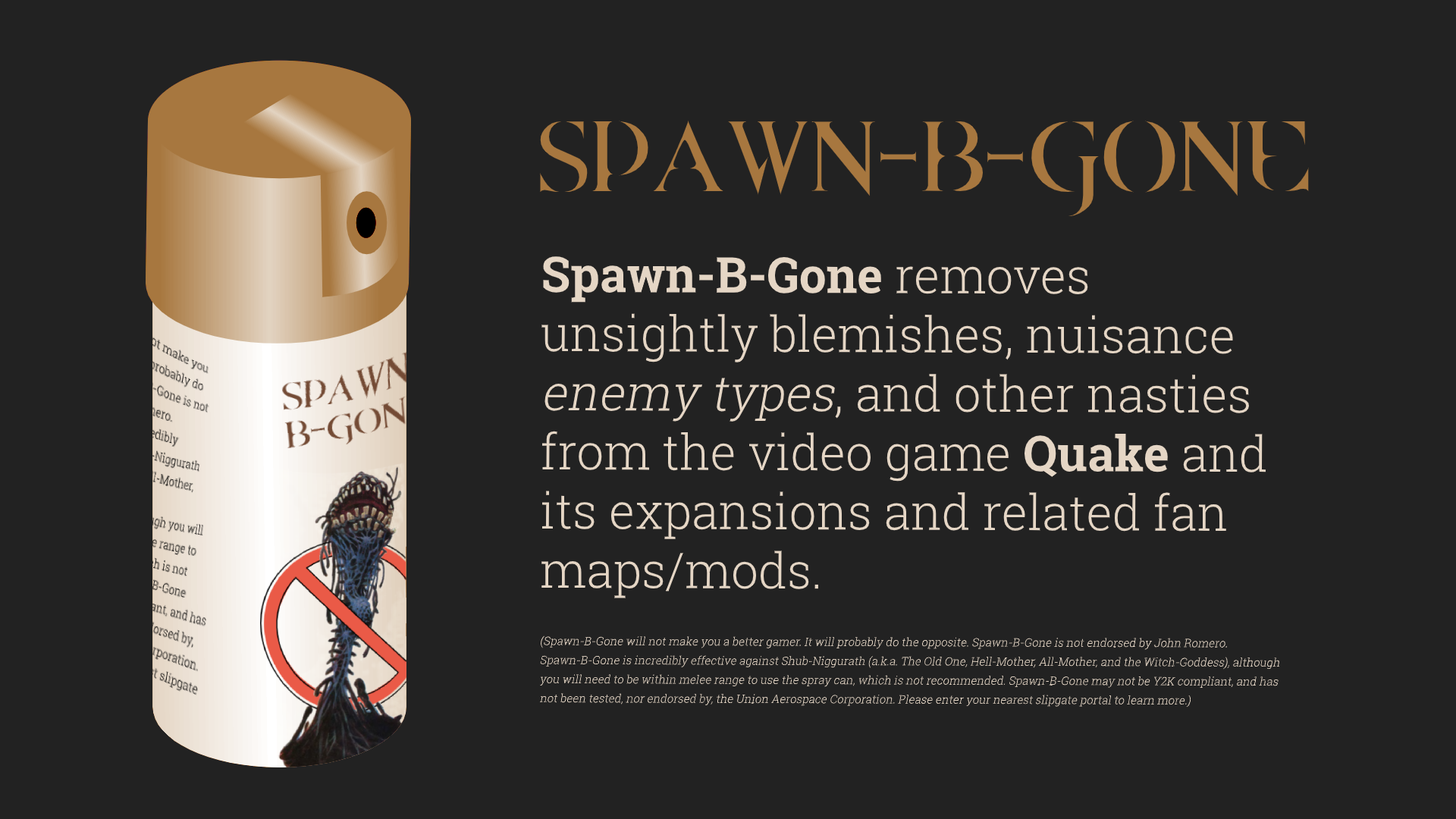
<style>
.page{position:relative;width:1456px;height:819px;background:#222222}
.page>*{position:absolute;margin:0}
.t1{font:87.2px "DpQuake";color:#a7773f}
.t2{font:44.1px "DpQuake";color:#a7773f}
.t3{font:11.5px/19.1px "RobotoSlab-Light";color:#e5d6c5;font-style:italic}
.t4{font:49.3px "RobotoSlab-Bold";color:#e5d6c5}
.t5{font:49.3px "RobotoSlab-Light";color:#e5d6c5}
.t6{font:49.3px "RobotoSlab-Light";color:#e5d6c5;font-style:italic}
.t7{font:11.4px/19px "RobotoSlab-Light";color:#e5d6c5;font-style:italic}
</style>
<div class="page">
<p class="t1" style="left:540px;top:121px;width:769px;height:96px">SPAWN B GONE</p>
<p class="t2" style="left:880px;top:152px;width:36px;height:10px;rotate:90deg">I</p>
<p class="t2" style="left:987px;top:152px;width:36px;height:10px;rotate:90deg">I</p>
<p class="t3" style="left:539px;top:256px;width:741px;height:452px"><span class="t4">Spawn-B-Gone </span><span class="t5">removes unsightly blemishes, nuisance </span><span class="t6">enemy types</span><span class="t5">, and other nasties from the video game </span><span class="t4">Quake </span><span class="t5">and its expansions and related fan maps/mods.<br><br><br></span>(Spawn-B-Gone will not make you a better gamer. It will probably do the opposite. Spawn-B-Gone is not endorsed by John Romero. Spawn-B-Gone is incredibly effective against <span class="t7">Shub-Niggurath </span><span class="t7">(</span><span class="t7">a.k.a. The Old One</span><span class="t7">, </span>Hell-Mother, All-Mother, and the Witch-Goddess), although you will need to be within melee range to use the spray can, which is not recommended. Spawn-B-Gone may not be Y2K compliant, and has not been tested, nor endorsed by, the Union Aerospace Corporation. Please enter your nearest slipgate portal to learn more.)</p>
</div>
